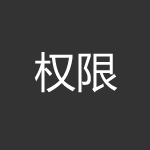
<style>
.page{position:relative;width:150px;height:150px;background:#333333}
.page>*{position:absolute;margin:0}
.t1{font:41.7px "MicrosoftYaHei";color:#ffffff}
</style>
<div class="page">
<p class="t1" style="left:34px;top:52px;width:84px;height:41px">权限</p>
</div>
